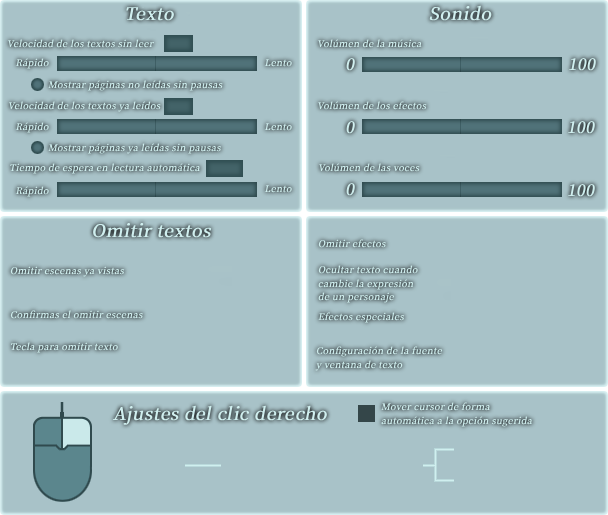
<style>
.page{position:relative;width:608px;height:515px;background:#a8c2c8}
.page>*{position:absolute;margin:0}
.t1{font:21px "OfficialFateFont-Medium";color:#d0efef;font-weight:bold;font-style:italic}
.t2{font:11px "OfficialFateFont-Medium";color:#d0efef;font-weight:bold;font-style:italic}
.t3{font:19px "OfficialFateFont-Medium";color:#d0efef;font-weight:bold;font-style:italic}
</style>
<div class="page">
<p class="t1" style="left:429px;top:5px;width:63px;height:16px">Sonido</p>
<p class="t1" style="left:126px;top:7px;width:48px;height:14px">Texto</p>
<p class="t2" style="left:8px;top:39px;width:147px;height:9px">Velocidad de los textos sin leer</p>
<p class="t2" style="left:318px;top:39px;width:104px;height:9px">Volúmen de la música</p>
<p class="t2" style="left:15px;top:58px;width:34px;height:11px">Rápido</p>
<p class="t2" style="left:264px;top:59px;width:28px;height:8px">Lento</p>
<p class="t3" style="left:346px;top:58px;width:9px;height:13px">0</p>
<p class="t3" style="left:568px;top:58px;width:28px;height:13px">100</p>
<p class="t2" style="left:48px;top:80px;width:175px;height:11px">Mostrar páginas no leídas sin pausas</p>
<p class="t2" style="left:8px;top:101px;width:153px;height:11px">Velocidad de los textos ya leídos</p>
<p class="t2" style="left:318px;top:101px;width:109px;height:9px">Volúmen de los efectos</p>
<p class="t2" style="left:15px;top:122px;width:34px;height:11px">Rápido</p>
<p class="t2" style="left:264px;top:123px;width:28px;height:8px">Lento</p>
<p class="t3" style="left:346px;top:121px;width:9px;height:13px">0</p>
<p class="t3" style="left:567px;top:121px;width:28px;height:13px">100</p>
<p class="t2" style="left:48px;top:143px;width:173px;height:11px">Mostrar páginas ya leídas sin pausas</p>
<p class="t2" style="left:10px;top:163px;width:190px;height:11px">Tiempo de espera en lectura automática</p>
<p class="t2" style="left:319px;top:163px;width:101px;height:9px">Volúmen de las voces</p>
<p class="t2" style="left:264px;top:185px;width:28px;height:8px">Lento</p>
<p class="t3" style="left:346px;top:183px;width:9px;height:13px">0</p>
<p class="t3" style="left:567px;top:184px;width:28px;height:13px">100</p>
<p class="t2" style="left:15px;top:186px;width:34px;height:11px">Rápido</p>
<p class="t1" style="left:92px;top:223px;width:120px;height:15px">Omitir textos</p>
<p class="t2" style="left:318px;top:239px;width:68px;height:9px">Omitir efectos</p>
<p class="t2" style="left:10px;top:266px;width:115px;height:11px">Omitir escenas ya vistas</p>
<p class="t2" style="left:318px;top:265px;width:100px;height:38px">Ocultar texto cuando<br>cambie la expresión<br>de un personaje</p>
<p class="t2" style="left:10px;top:310px;width:133px;height:9px">Confirmas el omitir escenas</p>
<p class="t2" style="left:318px;top:312px;width:87px;height:11px">Efectos especiales</p>
<p class="t2" style="left:10px;top:342px;width:108px;height:11px">Tecla para omitir texto</p>
<p class="t2" style="left:315px;top:346px;width:128px;height:25px">Configuración de la fuente <br>y ventana de texto</p>
<p class="t1" style="left:112px;top:405px;width:215px;height:20px">Ajustes del clic derecho</p>
<p class="t2" style="left:381px;top:402px;width:152px;height:25px">Mover cursor de forma<br>automática a la opción sugerida</p>
</div>
